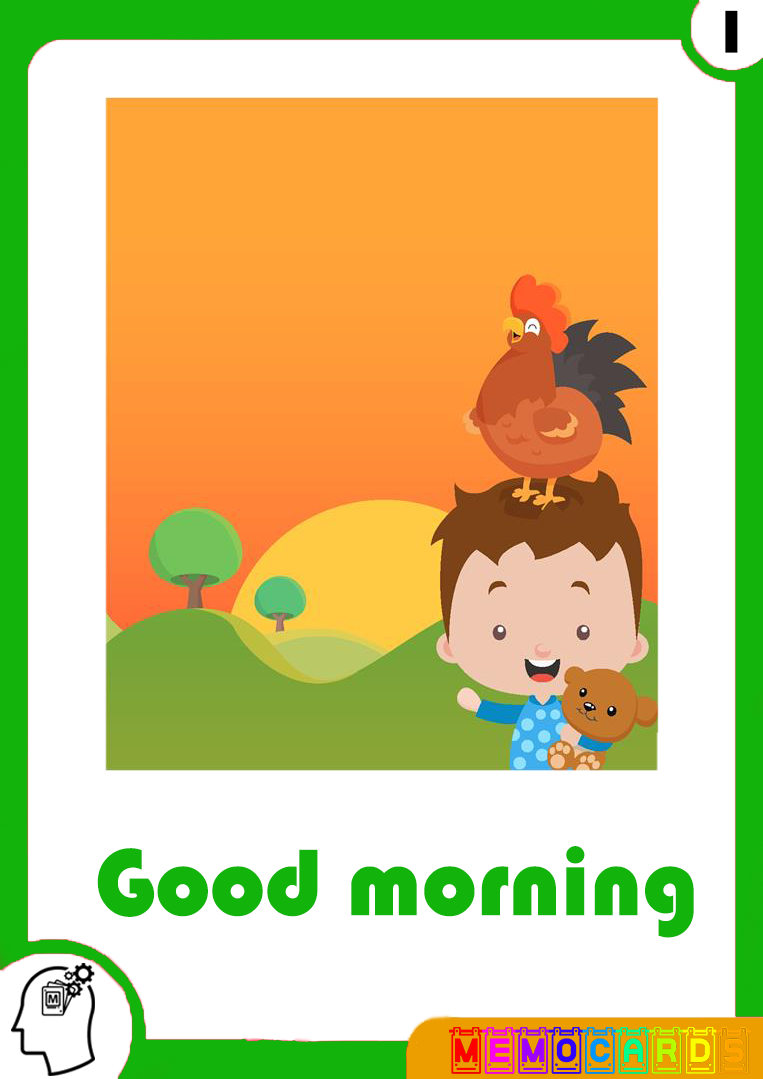
<style>
.page{position:relative;width:763px;height:1079px;background:#ffffff}
.page>*{position:absolute;margin:0}
.t1{font:62.9px "Bauhaus93";color:#000000}
.t2{font:98px "Bauhaus93";color:#12b30a}
</style>
<div class="page">
<p class="t1" style="left:725px;top:10px;width:13px;height:43px">1</p>
<p class="t2" style="left:97px;top:846px;width:597px;height:92px">Good morning</p>
</div>
